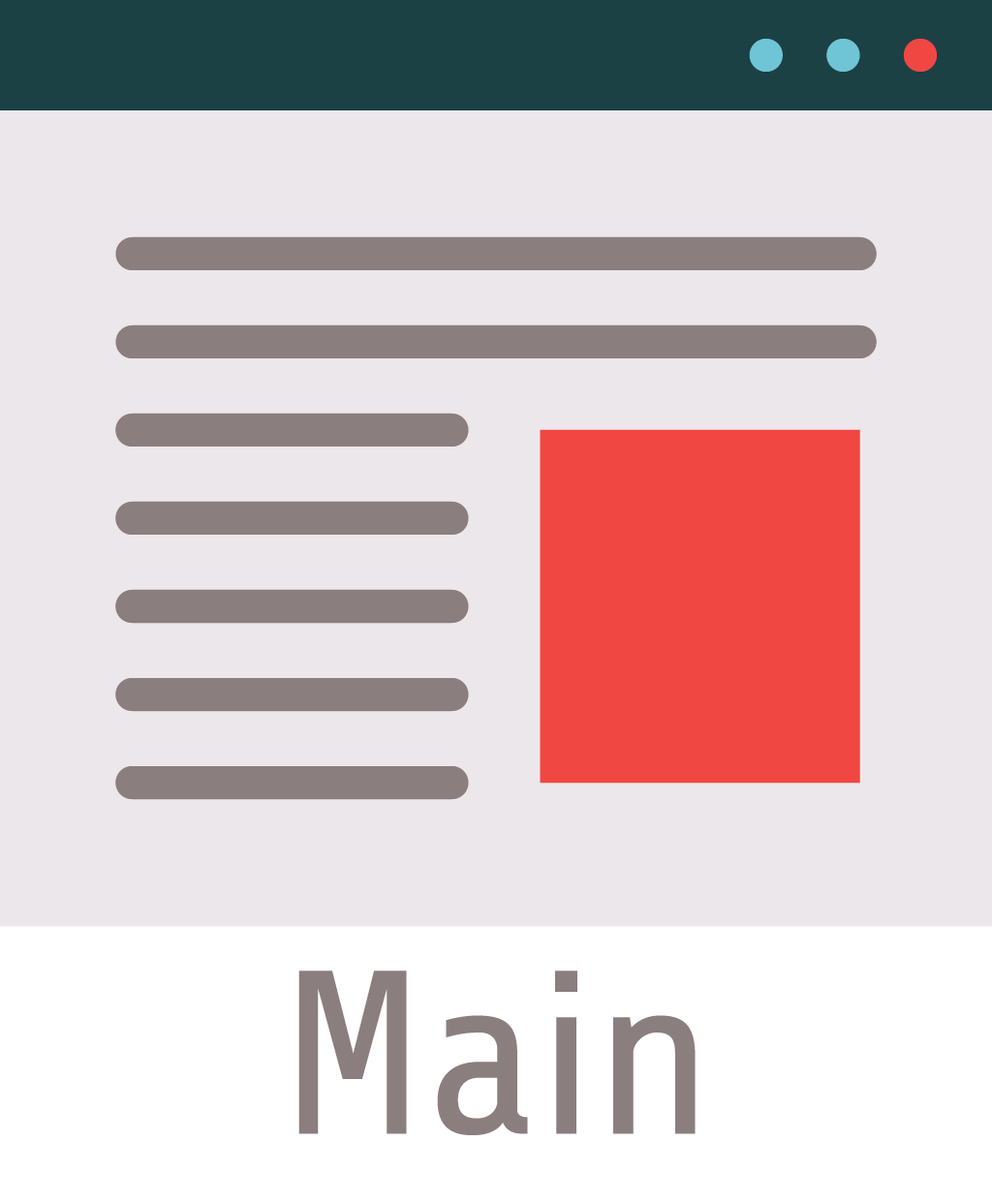
<style>
.page{position:relative;width:992px;height:1203px;background:#ece7ea}
.page>*{position:absolute;margin:0}
.t1{font:232.4px "Share-Regular";color:#8b7e7f}
</style>
<div class="page">
<p class="t1" style="left:298px;top:970px;width:397px;height:165px">Main</p>
</div>
